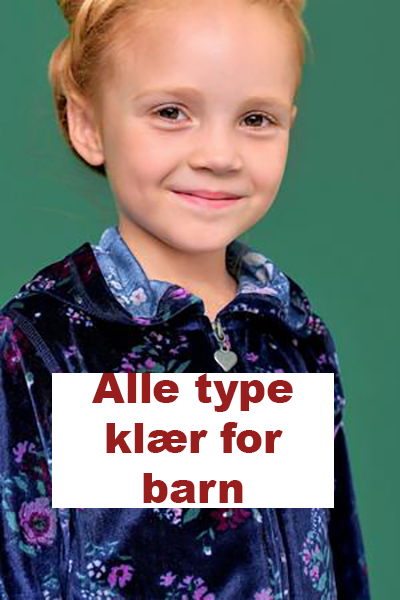
<style>
.page{position:relative;width:400px;height:600px}
.page>*{position:absolute;margin:0}
.t1{font:41.7px "Arial-Black";color:#981d1d}
</style>
<div class="page">
<p class="t1" style="left:92px;top:373px;width:201px;height:130px;text-align:center">Alle type klær for barn</p>
</div>
